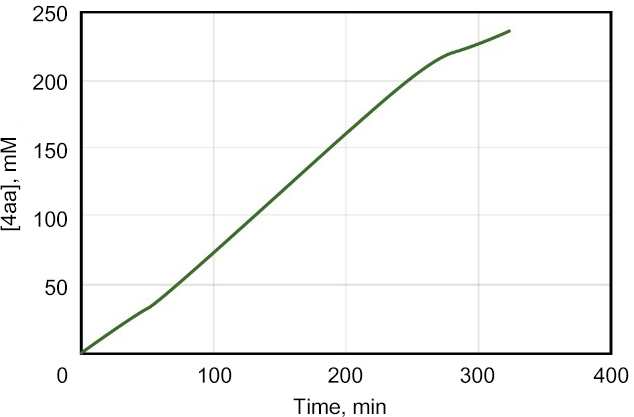
<style>
.page{position:relative;width:634px;height:417px;background:#ffffff}
.page>*{position:absolute;margin:0}
.t1{font:21.4px "ArialUnicodeMS";color:#000000}
</style>
<div class="page">
<p class="t1" style="left:33px;top:5px;width:34px;height:291px;text-align:right">250<br>200<br>150<br>100<br>50</p>
<p class="t1" style="left:0px;top:138px;width:21px;height:93px;rotate:-90deg">[4aa], mM</p>
<p class="t1" style="left:57px;top:367px;width:11px;height:16px">0</p>
<p class="t1" style="left:199px;top:367px;width:33px;height:16px">100</p>
<p class="t1" style="left:328px;top:367px;width:35px;height:16px">200</p>
<p class="t1" style="left:460px;top:367px;width:35px;height:16px">300</p>
<p class="t1" style="left:593px;top:367px;width:36px;height:16px">400</p>
<p class="t1" style="left:293px;top:398px;width:93px;height:19px">Time, min</p>
</div>
